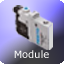
<style>
.page{position:relative;width:64px;height:64px}
.page>*{position:absolute;margin:0}
.t1{font:10px "Verdana";color:#ffffff}
</style>
<div class="page">
<p class="t1" style="left:14px;top:50px;width:35px;height:8px">Module</p>
</div>
